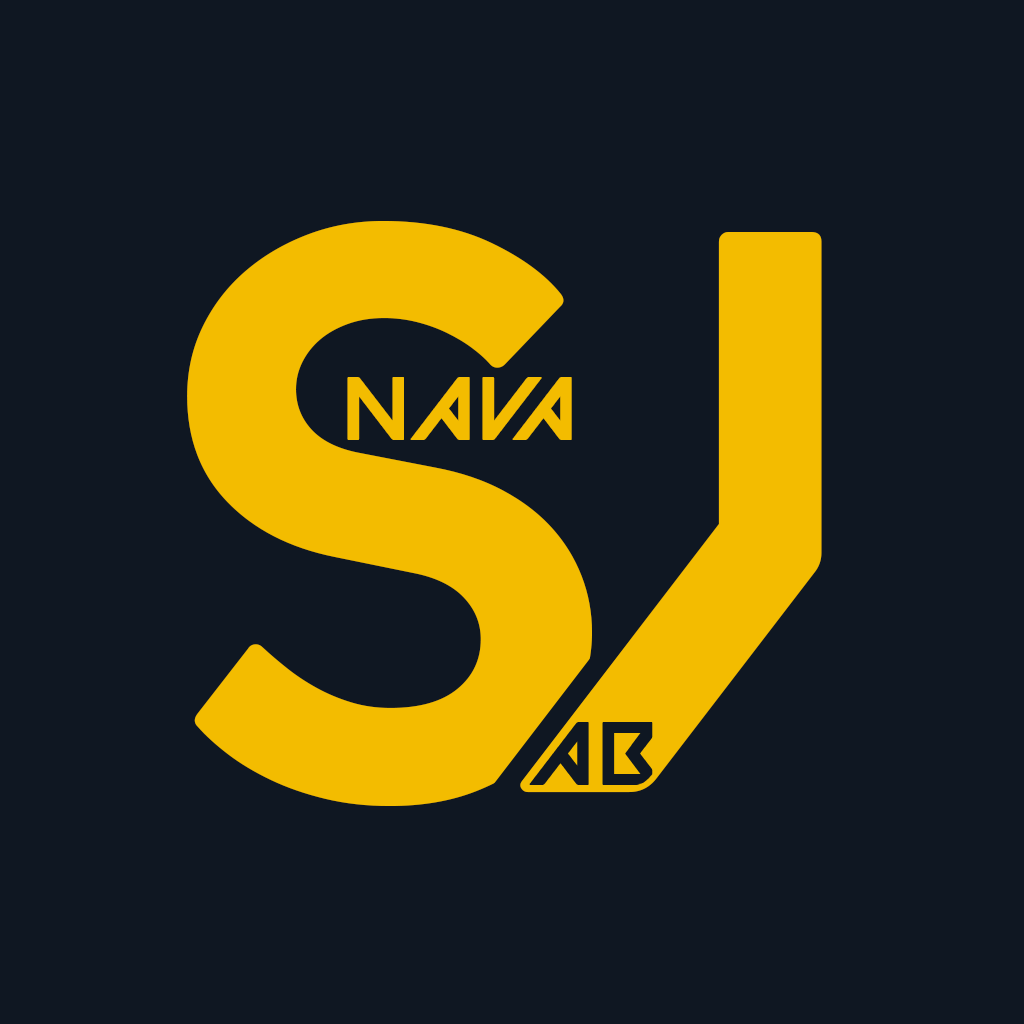
<style>
.page{position:relative;width:1024px;height:1024px;background:#0f1722}
.page>*{position:absolute;margin:0}
.t1{font:800px "VALORANT-Regular";letter-spacing:-0.125em;color:#f3bc00}
.t2{font:90px "VALORANT-Regular";color:#f3bc00}
</style>
<div class="page">
<p class="t1" style="left:187px;top:221px;width:635px;height:585px">sj</p>
<p class="t2" style="left:347px;top:377px;width:225px;height:63px">nAvA</p>
</div>
